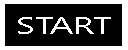
<style>
.page{position:relative;width:128px;height:50px;background:#000000}
.page>*{position:absolute;margin:0}
.t1{font:24px "Leelawadee";color:#ffffff;scale:1.44 1}
</style>
<div class="page">
<p class="t1" style="left:18px;top:17px;width:93px;height:17px">START</p>
</div>
